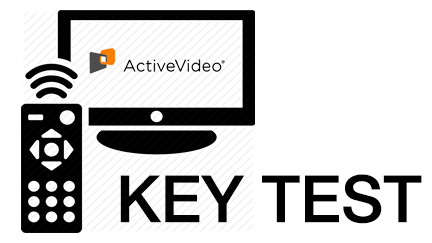
<style>
.page{position:relative;width:432px;height:243px;background:#ffffff}
.page>*{position:absolute;margin:0}
.t1{font:65px "HelveticaNeue-Medium";color:#000000}
</style>
<div class="page">
<p class="t1" style="left:120px;top:174px;width:302px;height:50px">KEY TEST</p>
</div>
